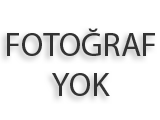
<style>
.page{position:relative;width:160px;height:120px;background:#ffffff}
.page>*{position:absolute;margin:0}
.t1{font:33px "MyriadPro-Regular";color:#333333}
</style>
<div class="page">
<p class="t1" style="left:7px;top:28px;width:148px;height:68px;text-align:center">FOTOĞRAF<br>YOK</p>
</div>
